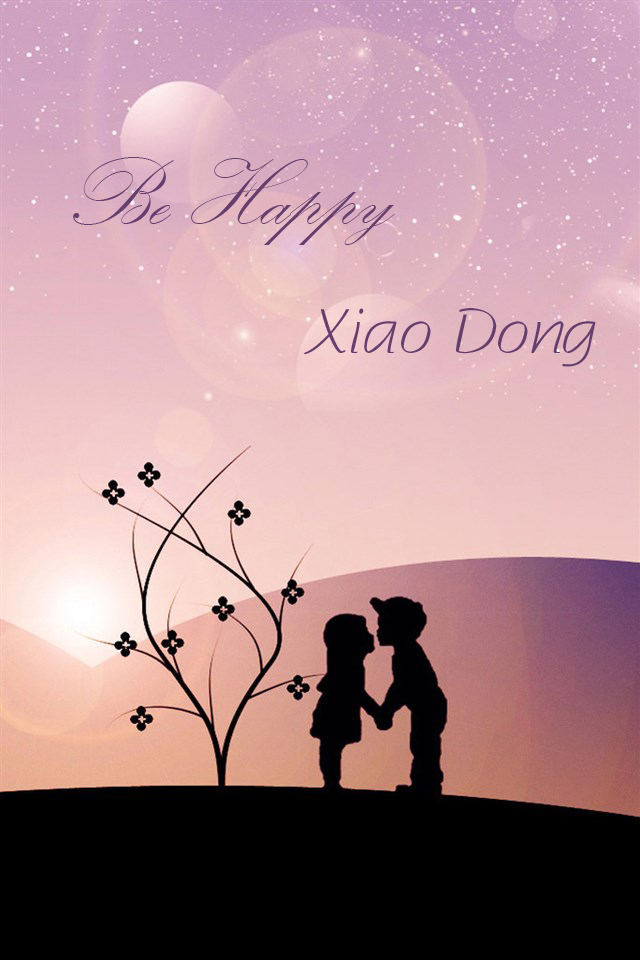
<style>
.page{position:relative;width:640px;height:960px}
.page>*{position:absolute;margin:0}
.t1{font:96px "KunstlerScript";color:#653e6d}
.t2{font:64px "Ò¶¸ùÓÑ¸Ö±ÊÐÐÊé¼òÌå";color:#653e6d}
</style>
<div class="page">
<p class="t1" style="left:73px;top:157px;width:322px;height:88px">Be Happy</p>
<p class="t2" style="left:304px;top:308px;width:292px;height:59px">Xiao Dong</p>
</div>
